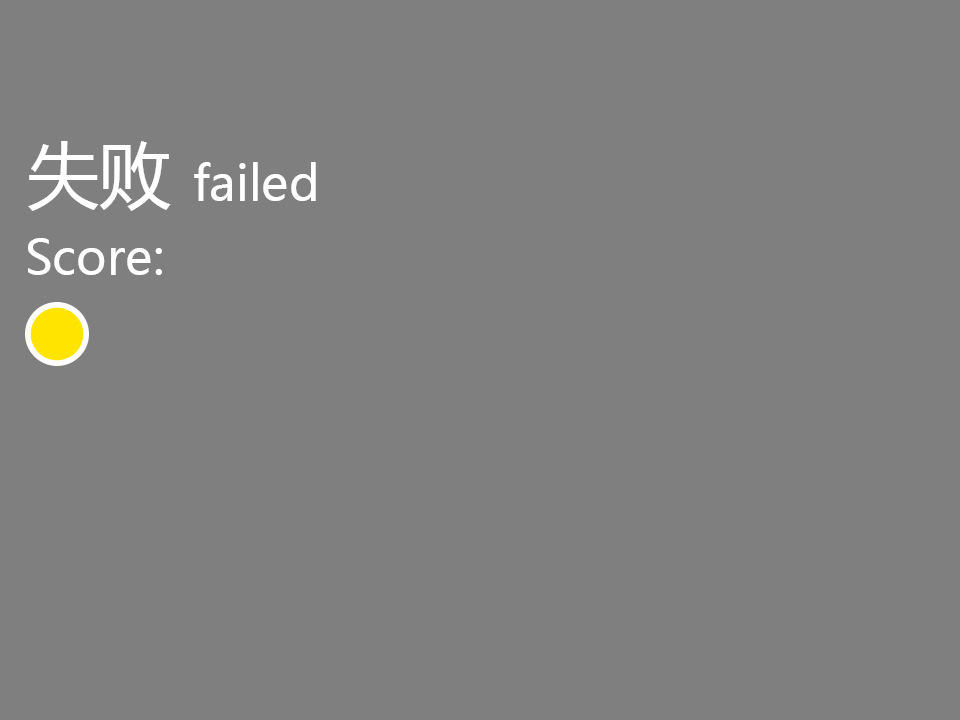
<style>
.page{position:relative;width:960px;height:720px;background:#7f7f7f}
.page>*{position:absolute;margin:0}
.t1{font:48px "MicrosoftYaHei";color:#ffffff}
.t2{font:72px "MicrosoftYaHei";color:#ffffff}
</style>
<div class="page">
<p class="t1" style="left:28px;top:141px;width:288px;height:70px"><span class="t2">失败 </span>failed</p>
<p class="t1" style="left:28px;top:238px;width:134px;height:37px">Score:</p>
</div>
